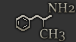
<style>
.page{position:relative;width:76px;height:42px;background:#333333}
.page>*{position:absolute;margin:0}
.t1{font:15px "SitkaBanner";letter-spacing:0.025em}
.t2{font:15px "SitkaBanner";letter-spacing:0.025em;color:#9f9c93}
</style>
<div class="page">
<p class="t1" style="left:48px;top:3px;width:27px;height:10px">NH2</p>
<p class="t2" style="left:40px;top:28px;width:25px;height:13px">CH3</p>
</div>
